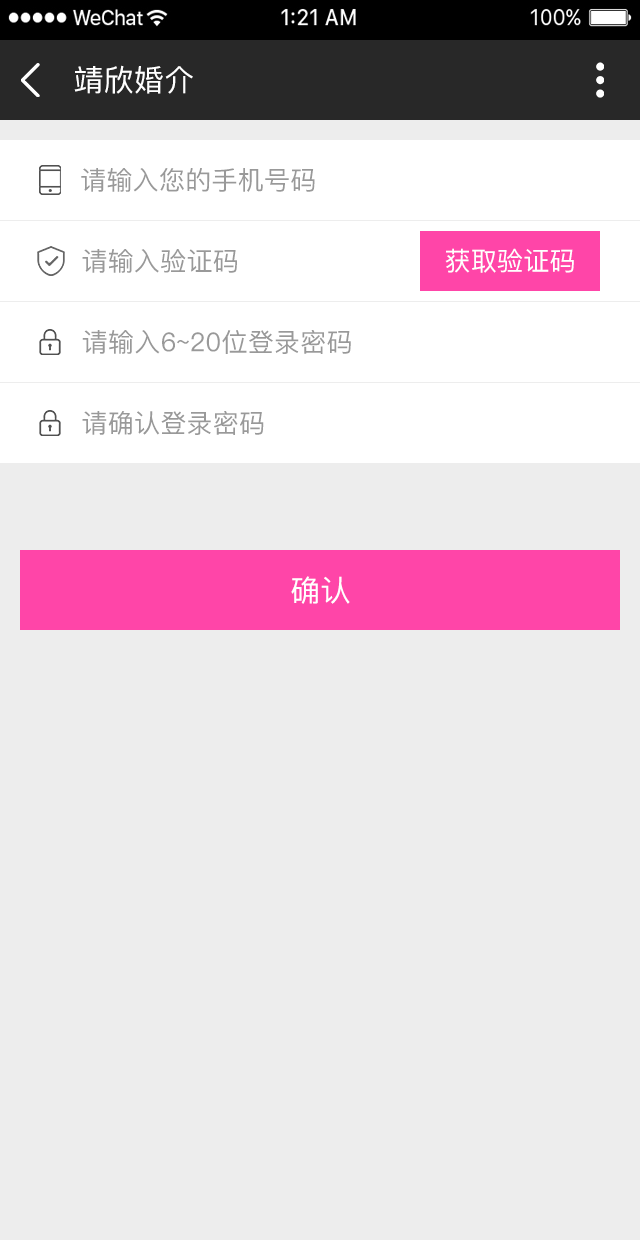
<style>
.page{position:relative;width:640px;height:1240px;background:#ededed}
.page>*{position:absolute;margin:0}
.t1{font:30px "PingFang-SC-Medium";letter-spacing:0.01em;color:#ffffff;text-transform:uppercase}
.t2{font:26px "PingFang-SC-Medium";letter-spacing:0.01em;color:#999999;text-transform:uppercase}
.t3{font:26px "PingFang-SC-Medium";letter-spacing:0.01em;color:#ffffff;text-transform:uppercase}
</style>
<div class="page">
<p class="t1" style="left:74px;top:65px;width:119px;height:29px">靖欣婚介</p>
<p class="t2" style="left:81px;top:168px;width:234px;height:24px">请输入您的手机号码</p>
<p class="t2" style="left:82px;top:249px;width:155px;height:24px">请输入验证码</p>
<p class="t3" style="left:445px;top:248px;width:129px;height:25px">获取验证码</p>
<p class="t2" style="left:82px;top:330px;width:269px;height:24px">请输入6~20位登录密码</p>
<p class="t2" style="left:82px;top:411px;width:182px;height:24px">请确认登录密码</p>
<p class="t1" style="left:291px;top:576px;width:59px;height:28px">确认</p>
</div>
